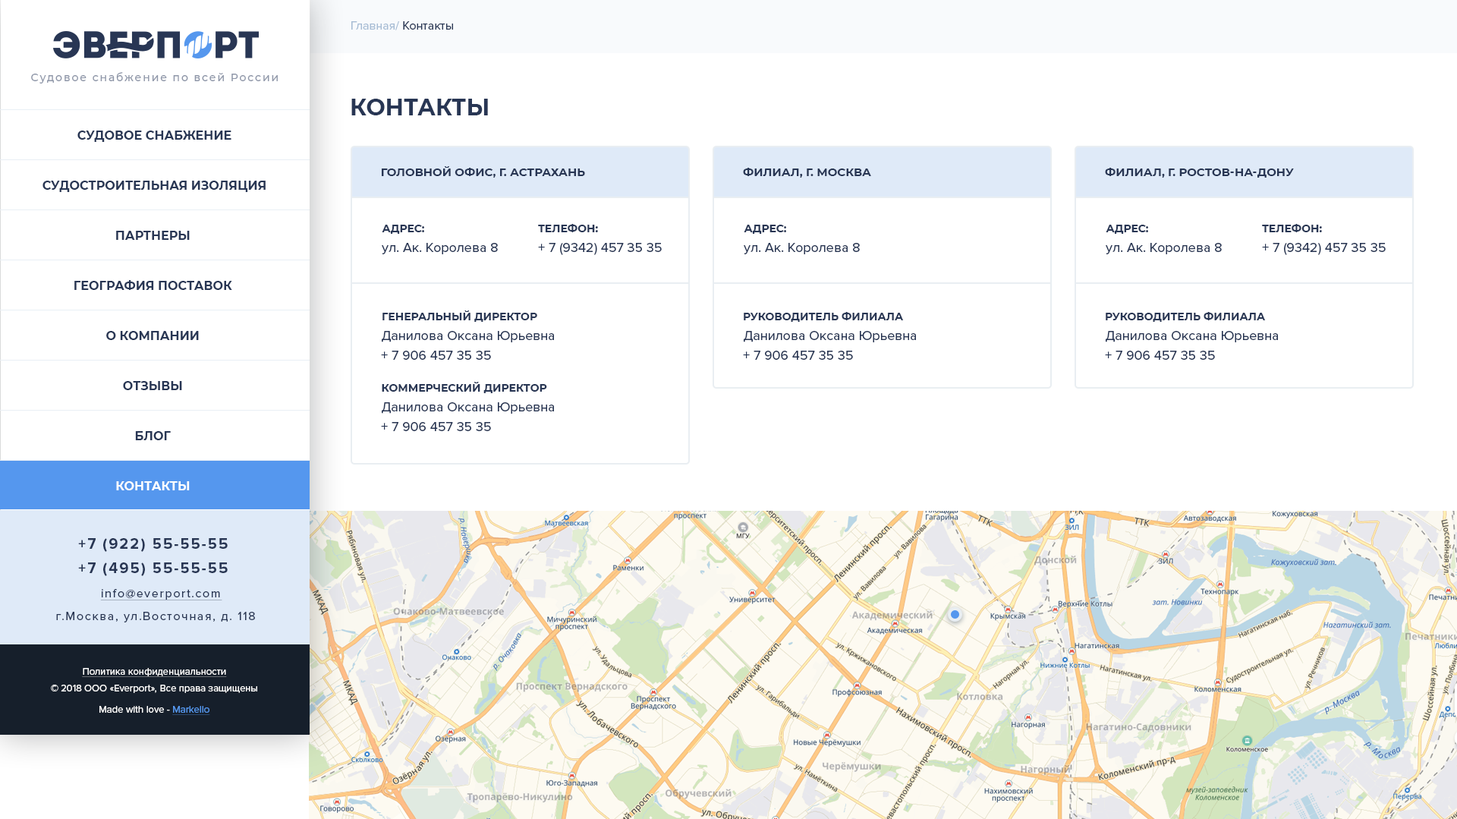
<style>
.page{position:relative;width:1457px;height:819px;background:#ffffff}
.page>*{position:absolute;margin:0}
.t1{font:12.1px "ProximaNova-Regular";color:#a6bcd4}
.t2{font:12.1px "ProximaNova-Regular";color:#283654}
.t3{font:10.6px "Montserrat-Medium";letter-spacing:0.135em;color:#8e96a8}
.t4{font:22.8px "Montserrat-Bold";color:#283654;text-transform:uppercase}
.t5{font:12.1px/50.1px "Montserrat-Bold";color:#283654;text-transform:uppercase}
.t6{font:12.1px/50.1px "Montserrat-Bold";color:#ffffff;text-transform:uppercase}
.t7{font:11.4px "Montserrat-Bold";color:#283654;text-transform:uppercase}
.t8{font:10.6px "Montserrat-Bold";color:#283654;text-transform:uppercase}
.t9{font:13.7px "ProximaNova-Regular";color:#283654}
.t10{font:15.2px "ProximaNova-Bold";letter-spacing:0.1em;color:#283654}
.t11{font:12.1px "ProximaNova-Regular";letter-spacing:0.1em;color:#283654;text-decoration:underline}
.t12{font:12.1px "ProximaNova-Regular";letter-spacing:0.1em;color:#283654}
.t13{font:9.9px/16.7px "ProximaNova-Regular";color:#ffffff}
.t14{font:9.9px/15.2px "ProximaNova-Regular";color:#ffffff;text-decoration:underline}
.t15{font:9.9px "ProximaNova-Regular";color:#ffffff}
.t16{font:9.9px "ProximaNova-Regular";color:#5597ee;text-decoration:underline}
</style>
<div class="page">
<p class="t1" style="left:351px;top:21px;width:102px;height:9px">Главная/ <span class="t2">Контакты</span></p>
<p class="t3" style="left:31px;top:72px;width:247px;height:11px">Судовое снабжение по всей России</p>
<p class="t4" style="left:351px;top:99px;width:137px;height:16px">Контакты</p>
<p class="t5" style="left:42px;top:130px;width:224px;height:360px;text-align:center">Судовое снабжение<br> Судостроительная изоляция<br>Партнеры<br>География поставок<br>О компании<br>Отзывы<br>блог<br><span class="t6">контакты</span></p>
<p class="t7" style="left:382px;top:166px;width:203px;height:12px">Головной офис, г. Астрахань</p>
<p class="t7" style="left:743px;top:168px;width:128px;height:10px">Филиал, г. Москва</p>
<p class="t7" style="left:1105px;top:168px;width:189px;height:10px">Филиал, г. Ростов-на-Дону</p>
<p class="t8" style="left:382px;top:225px;width:42px;height:9px">Адрес:</p>
<p class="t8" style="left:538px;top:224px;width:60px;height:8px">телефон:</p>
<p class="t8" style="left:744px;top:225px;width:42px;height:9px">Адрес:</p>
<p class="t8" style="left:1105px;top:225px;width:43px;height:9px">Адрес:</p>
<p class="t8" style="left:1262px;top:224px;width:60px;height:8px">телефон:</p>
<p class="t9" style="left:382px;top:243px;width:116px;height:11px">ул. Ак. Королева 8</p>
<p class="t9" style="left:538px;top:243px;width:124px;height:12px">+ 7 (9342) 457 35 35</p>
<p class="t9" style="left:744px;top:243px;width:116px;height:11px">ул. Ак. Королева 8</p>
<p class="t9" style="left:1105px;top:243px;width:116px;height:11px">ул. Ак. Королева 8</p>
<p class="t9" style="left:1262px;top:243px;width:123px;height:12px">+ 7 (9342) 457 35 35</p>
<p class="t8" style="left:382px;top:310px;width:155px;height:12px">Генеральный директор</p>
<p class="t8" style="left:744px;top:312px;width:160px;height:10px">Руководитель филиала</p>
<p class="t8" style="left:1105px;top:312px;width:160px;height:10px">Руководитель филиала</p>
<p class="t9" style="left:382px;top:331px;width:172px;height:11px">Данилова Оксана Юрьевна</p>
<p class="t9" style="left:744px;top:331px;width:172px;height:11px">Данилова Оксана Юрьевна</p>
<p class="t9" style="left:1105px;top:331px;width:173px;height:11px">Данилова Оксана Юрьевна</p>
<p class="t9" style="left:381px;top:351px;width:110px;height:9px">+ 7 906 457 35 35</p>
<p class="t9" style="left:743px;top:351px;width:110px;height:9px">+ 7 906 457 35 35</p>
<p class="t9" style="left:1105px;top:351px;width:110px;height:9px">+ 7 906 457 35 35</p>
<p class="t8" style="left:382px;top:382px;width:165px;height:11px">Коммерческий директор</p>
<p class="t9" style="left:382px;top:402px;width:172px;height:11px">Данилова Оксана Юрьевна</p>
<p class="t9" style="left:381px;top:422px;width:110px;height:9px">+ 7 906 457 35 35</p>
<p class="t10" style="left:78px;top:538px;width:150px;height:14px">+7 (922) 55-55-55</p>
<p class="t10" style="left:78px;top:562px;width:150px;height:14px">+7 (495) 55-55-55</p>
<p class="t11" style="left:100px;top:589px;width:122px;height:11px">info@everport.com</p>
<p class="t12" style="left:56px;top:611px;width:199px;height:11px">г.Москва, ул.Восточная, д. 118</p>
<p class="t13" style="left:51px;top:668px;width:206px;height:25px;text-align:center"><span class="t14">Политика конфиденциальности<br></span>© 2018 ООО «Everport», Все права защищены</p>
<p class="t15" style="left:99px;top:706px;width:111px;height:9px">Made with love - <span class="t16">Markello</span></p>
</div>
